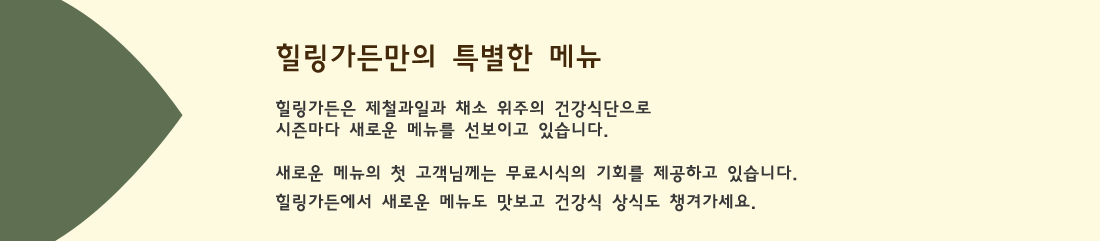
<style>
.page{position:relative;width:1100px;height:241px;background:#fefae0}
.page>*{position:absolute;margin:0}
.t1{font:18px "HaanYGodic23";color:#383838}
.t2{font:30px/9px "HaanYGodic23";color:#432809}
</style>
<div class="page">
<p class="t1" style="left:276px;top:43px;width:521px;height:169px"><span class="t2">힐링가든만의 특별한 메뉴<br><br></span>힐링가든은 제철과일과 채소 위주의 건강식단으로 <br>시즌마다 새로운 메뉴를 선보이고 있습니다. <br><br>새로운 메뉴의 첫 고객님께는 무료시식의 기회를 제공하고 있습니다. <br>힐링가든에서 새로운 메뉴도 맛보고 건강식 상식도 챙겨가세요.</p>
</div>
